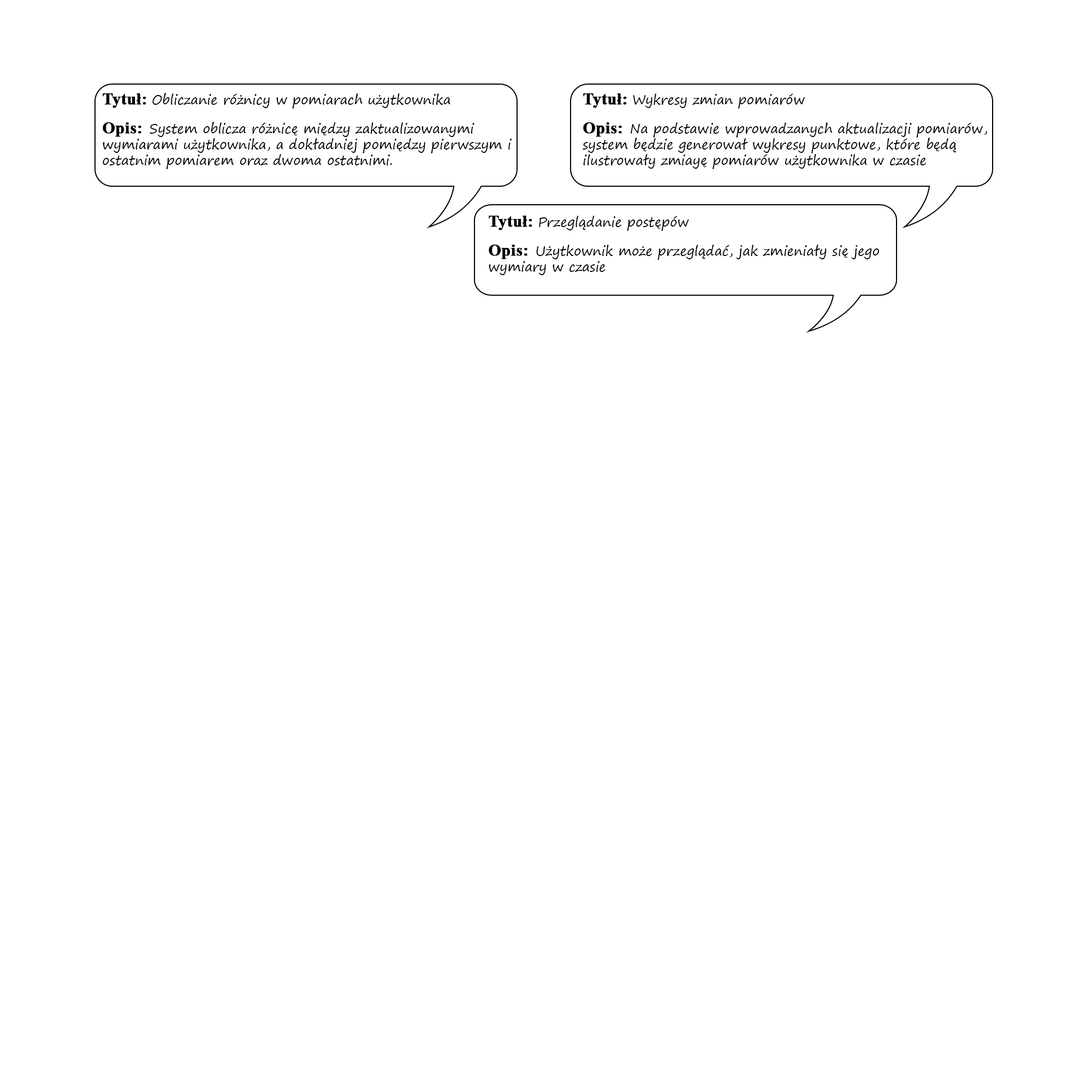
<style>
.page{position:relative;width:1092px;height:1092px;background:#ffffff}
.page>*{position:absolute;margin:0}
.t1{font:13.1px "SegoePrint";color:#000000}
.t2{font:16.4px "TimesNewRomanPS-BoldMT";color:#000000;font-weight:bold}
</style>
<div class="page">
<p class="t1" style="left:103px;top:93px;width:409px;height:76px"><span class="t2">Tytuł: </span>Obliczanie różnicy w pomiarach użytkownika<br><br><span class="t2">Opis:  </span>System oblicza różnicę między zaktualizowanymi wymiarami użytkownika, a dokładniej pomiędzy pierwszym i ostatnim pomiarem oraz dwoma ostatnimi.</p>
<p class="t1" style="left:583px;top:93px;width:404px;height:76px"><span class="t2">Tytuł: </span>Wykresy zmian pomiarów<br><br><span class="t2">Opis:  </span>Na podstawie wprowadzanych aktualizacji pomiarów, system będzie generował wykresy punktowe, które będą ilustrowały zmiayę pomiarów użytkownika w czasie</p>
<p class="t1" style="left:489px;top:216px;width:390px;height:59px"><span class="t2">Tytuł: </span>Przeglądanie postępów<br><br><span class="t2">Opis:  </span>Użytkownik może przeglądać, jak zmieniały się jego wymiary w czasie</p>
</div>
